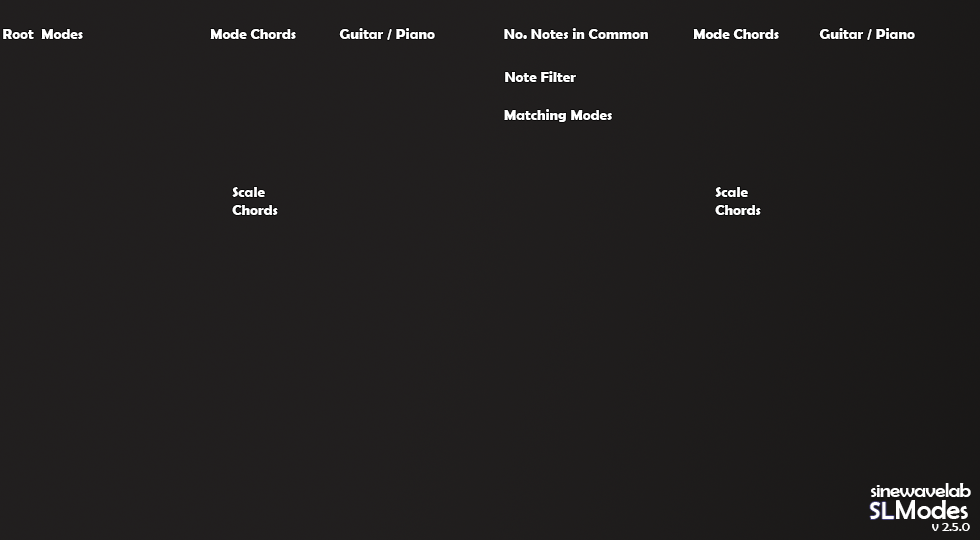
<style>
.page{position:relative;width:980px;height:540px}
.page>*{position:absolute;margin:0}
.t1{font:15px "BerlinSansFBDemi-Bold";color:#ffffff}
.t2{font:20px "BerlinSansFB-Reg";letter-spacing:-0.04em;color:#ffffff;scale:1.07 1}
.t3{font:25.4px "BerlinSansFB-Reg";color:#ffffff}
.t4{font:28px "BerlinSansFB-Reg";color:#ffffff}
.t5{font:14px "BerlinSansFB-Reg";color:#ffffff}
</style>
<div class="page">
<p class="t1" style="left:3px;top:29px;width:31px;height:10px">Root</p>
<p class="t1" style="left:41px;top:29px;width:42px;height:10px">Modes</p>
<p class="t1" style="left:210px;top:29px;width:86px;height:10px">Mode Chords</p>
<p class="t1" style="left:339px;top:28px;width:96px;height:12px">Guitar / Piano</p>
<p class="t1" style="left:504px;top:28px;width:144px;height:11px">No. Notes in Common</p>
<p class="t1" style="left:693px;top:29px;width:86px;height:10px">Mode Chords</p>
<p class="t1" style="left:819px;top:28px;width:96px;height:12px">Guitar / Piano</p>
<p class="t1" style="left:505px;top:71px;width:71px;height:11px">Note Filter</p>
<p class="t1" style="left:504px;top:109px;width:108px;height:13px">Matching Modes</p>
<p class="t1" style="left:232px;top:187px;width:46px;height:28px">Scale <br>Chords</p>
<p class="t1" style="left:715px;top:187px;width:46px;height:28px">Scale <br>Chords</p>
<p class="t2" style="left:871px;top:483px;width:100px;height:14px">sinewavelab</p>
<p class="t3" style="left:870px;top:502px;width:24px;height:17px">SL</p>
<p class="t4" style="left:896px;top:500px;width:72px;height:19px">Modes</p>
<p class="t5" style="left:932px;top:523px;width:38px;height:8px">v 2.5.0</p>
</div>
